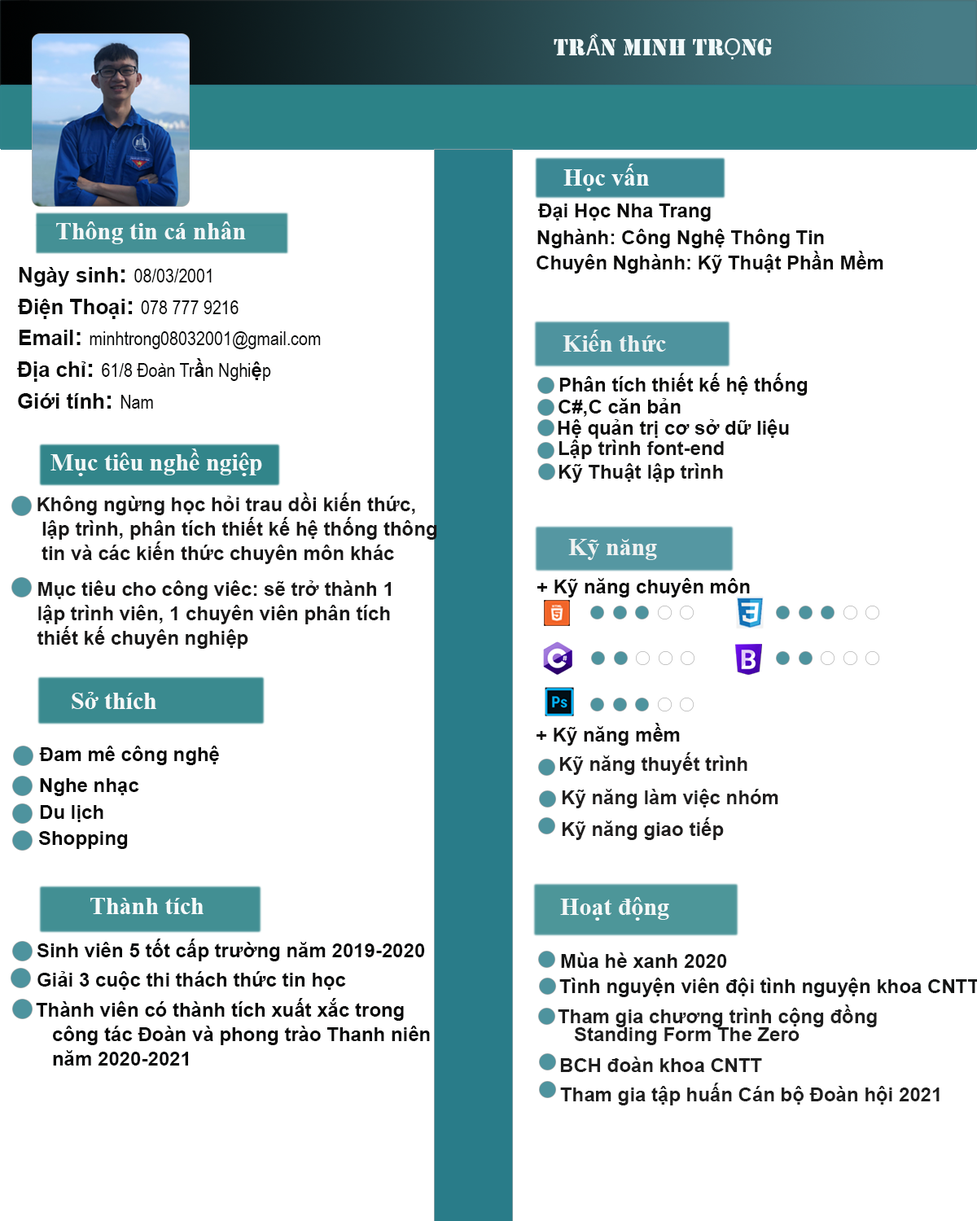
<style>
.page{position:relative;width:977px;height:1221px;background:#ffffff}
.page>*{position:absolute;margin:0}
.t1{font:24.4px "Stencil";color:#f1f9fa}
.t2{font:24.4px "MyriadPro-Regular";color:#f1f9fa}
.t3{font:24.4px "TimesNewRomanPS-BoldMT";color:#f4fbfc}
.t4{font:19.5px "Arial-BoldMT";color:#0c0c0b}
.t5{font:24.4px "TimesNewRomanPS-BoldMT";color:#f3f7f8}
.t6{font:19.5px "ArialNarrow";color:#080909}
.t7{font:21.2px "Arial-BoldMT";color:#080909}
.t8{font:24.4px "Arial-BoldMT";color:#080909}
.t9{font:24.4px "TimesNewRomanPS-BoldMT";color:#ebf2f3}
.t10{font:19.5px "Arial-BoldMT";color:#080909}
.t11{font:24.4px "TimesNewRomanPS-BoldMT";color:#f2f8f8}
.t12{font:19.5px "Arial-BoldMT";color:#161615}
.t13{font:19.5px/24.4px "Arial-BoldMT";color:#181717}
.t14{font:24.4px "TimesNewRomanPS-BoldMT";color:#eff2f2}
.t15{font:24.4px "TimesNewRomanPS-BoldMT";color:#f6f8f8}
.t16{font:19.5px "Arial-BoldMT";color:#111010}
.t17{font:19.5px "Arial-BoldMT";color:#070707}
.t18{font:19.5px "Arial-BoldMT";color:#1f1d1d}
.t19{font:24.4px "TimesNewRomanPS-BoldMT";color:#f5fafa}
.t20{font:24.4px "TimesNewRomanPS-BoldMT";color:#f3f8f8}
.t21{font:19.5px "Arial-BoldMT";color:#141515}
.t22{font:19.5px/24.4px "Arial-BoldMT";color:#080909}
.t23{font:19.5px/17.9px "Arial-BoldMT";color:#1e1e1e}
.t24{font:19.5px "Arial-BoldMT";color:#1e1e1e}
</style>
<div class="page">
<p class="t1" style="left:553px;top:33px;width:219px;height:26px">TR<span class="t2">Ầ</span>N MINH TR<span class="t2">Ọ</span>NG</p>
<p class="t3" style="left:563px;top:164px;width:86px;height:27px">Học vấn</p>
<p class="t4" style="left:538px;top:203px;width:173px;height:18px">Đại Học Nha Trang</p>
<p class="t5" style="left:56px;top:221px;width:190px;height:23px">Thông tin cá nhân</p>
<p class="t4" style="left:537px;top:229px;width:287px;height:19px">Nghành: Công Nghệ Thông Tin</p>
<p class="t4" style="left:536px;top:251px;width:347px;height:22px">Chuyên Nghành: Kỹ Thuật Phần Mềm</p>
<p class="t6" style="left:19px;top:267px;width:193px;height:19px"><span class="t7">Ngày sinh</span><span class="t8">: </span>08/03/2001</p>
<p class="t6" style="left:18px;top:299px;width:220px;height:20px"><span class="t7">Điện Thoại</span><span class="t8">: </span>078 777 9216</p>
<p class="t6" style="left:20px;top:330px;width:301px;height:19px"><span class="t7">Email</span><span class="t8">: </span>minhtrong08032001@gmail.com</p>
<p class="t9" style="left:562px;top:330px;width:104px;height:22px">Kiến thức</p>
<p class="t6" style="left:17px;top:358px;width:254px;height:24px"><span class="t7">Địa chỉ</span><span class="t8">: </span>61/8 Đoàn Tr<span class="t10">ầ</span>n Nghi<span class="t10">ệ</span>p</p>
<p class="t4" style="left:559px;top:373px;width:248px;height:23px">Phân tích thiết kế hệ thống</p>
<p class="t7" style="left:18px;top:393px;width:135px;height:16px">Giới tính<span class="t8">: </span><span class="t6">Nam</span></p>
<p class="t4" style="left:558px;top:398px;width:122px;height:19px">C#,C căn bản</p>
<p class="t4" style="left:558px;top:419px;width:231px;height:20px">Hệ quản trị cơ sở dữ liệu</p>
<p class="t11" style="left:50px;top:448px;width:212px;height:28px">Mục tiêu nghề ngiệp</p>
<p class="t12" style="left:558px;top:440px;width:166px;height:19px">Lập trình font-end</p>
<p class="t12" style="left:558px;top:463px;width:165px;height:20px">Kỹ Thuật lập trình</p>
<p class="t13" style="left:37px;top:492px;width:400px;height:72px">Không ngừng học hỏi trau dồi kiến thức,<br>   lập trình, phân tích thiết kế hệ thống thông<br>   tin và các kiến thức chuyên môn khác</p>
<p class="t14" style="left:568px;top:539px;width:89px;height:21px">Kỹ năng</p>
<p class="t13" style="left:37px;top:580px;width:354px;height:69px">Mục tiêu cho công viêc: sẽ trở thành 1 <br>  lập trình viên, 1 chuyên viên phân tích <br>  thiết kế chuyên nghiệp</p>
<p class="t4" style="left:537px;top:578px;width:213px;height:19px">+ Kỹ năng chuyên môn</p>
<p class="t15" style="left:72px;top:692px;width:84px;height:17px">Sở thích</p>
<p class="t16" style="left:536px;top:723px;width:144px;height:23px">+ Kỹ năng mềm</p>
<p class="t17" style="left:39px;top:746px;width:180px;height:19px">Đam mê công nghệ</p>
<p class="t18" style="left:559px;top:752px;width:188px;height:23px">Kỹ năng thuyết trình</p>
<p class="t17" style="left:40px;top:778px;width:99px;height:18px">Nghe nhạc</p>
<p class="t18" style="left:562px;top:789px;width:216px;height:19px">Kỹ năng làm việc nhóm</p>
<p class="t17" style="left:40px;top:805px;width:63px;height:17px">Du lịch</p>
<p class="t18" style="left:562px;top:817px;width:162px;height:23px">Kỹ năng giao tiếp</p>
<p class="t17" style="left:38px;top:831px;width:90px;height:18px">Shopping</p>
<p class="t19" style="left:90px;top:898px;width:113px;height:16px">Thành tích</p>
<p class="t20" style="left:560px;top:897px;width:109px;height:24px">Hoạt động</p>
<p class="t10" style="left:37px;top:938px;width:388px;height:23px">Sinh viên 5 tốt cấp trường năm 2019-2020</p>
<p class="t21" style="left:561px;top:952px;width:166px;height:16px">Mùa hè xanh 2020</p>
<p class="t10" style="left:37px;top:971px;width:309px;height:19px">Giải 3 cuộc thi thách thức tin học</p>
<p class="t22" style="left:36px;top:998px;width:394px;height:67px">Thành viên có thành tích xuất xắc trong <br>   công tác Đoàn và phong trào Thanh niên <br>   năm 2020-2021</p>
<p class="t23" style="left:558px;top:1004px;width:319px;height:41px">Tham gia chương trình cộng đồng <br>   Standing Form The Zero</p>
<p class="t24" style="left:560px;top:1056px;width:202px;height:16px">BCH đoàn khoa CNTT</p>
<p class="t24" style="left:560px;top:1083px;width:379px;height:22px">Tham gia tập huấn Cán bộ Đoàn hội 2021</p>
</div>
